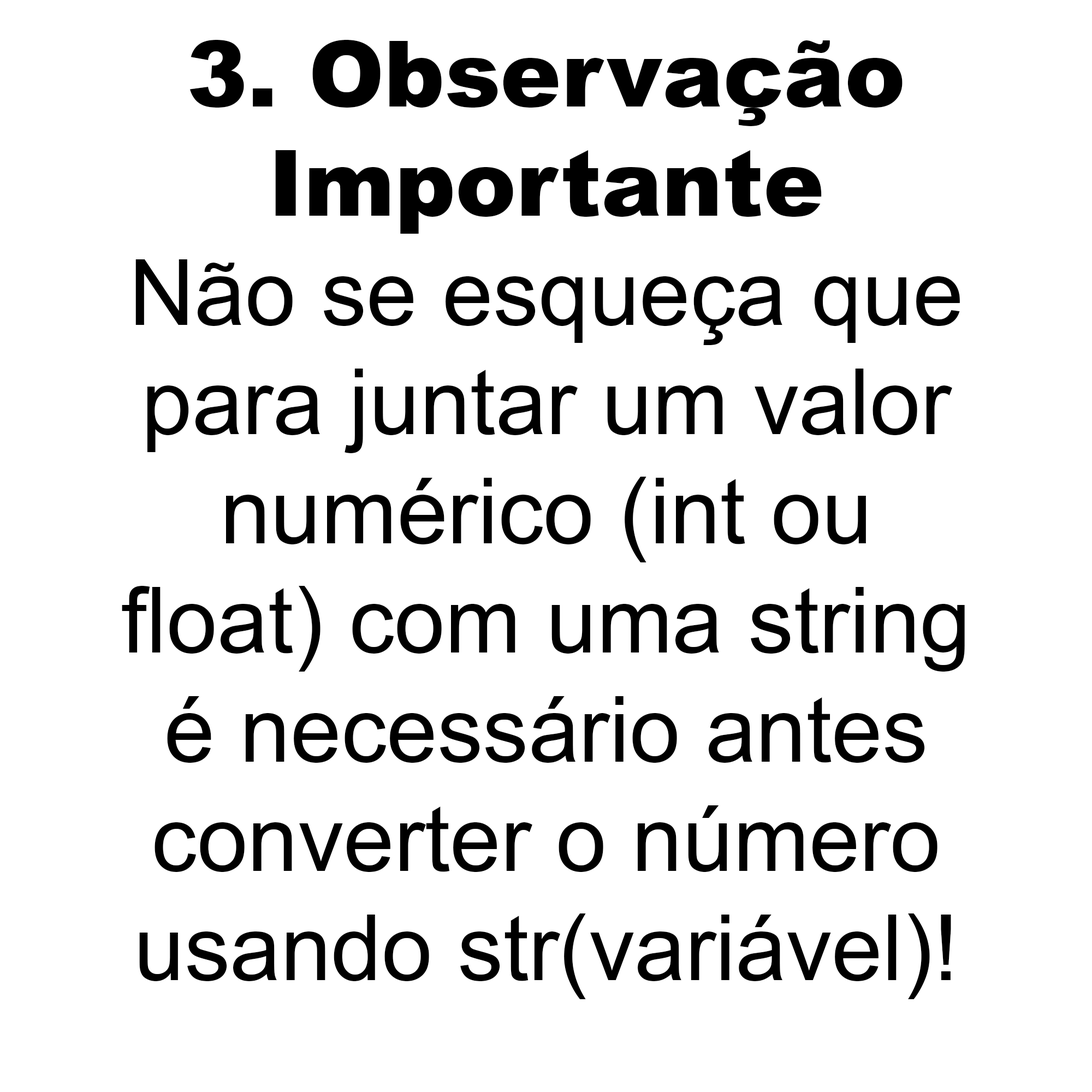
<style>
.page{position:relative;width:1092px;height:1092px;background:#ffffff}
.page>*{position:absolute;margin:0}
.t1{font:91px "ArialMT";color:#000000}
.t2{font:91px "Arial-Black";color:#000000}
</style>
<div class="page">
<p class="t1" style="left:122px;top:40px;width:843px;height:959px;text-align:center"><span class="t2">3. Observação<br>Importante<br></span>Não se esqueça que<br>para juntar um valor<br>numérico (int ou<br>float) com uma string<br>é necessário antes<br>converter o número<br>usando str(variável)!</p>
</div>
